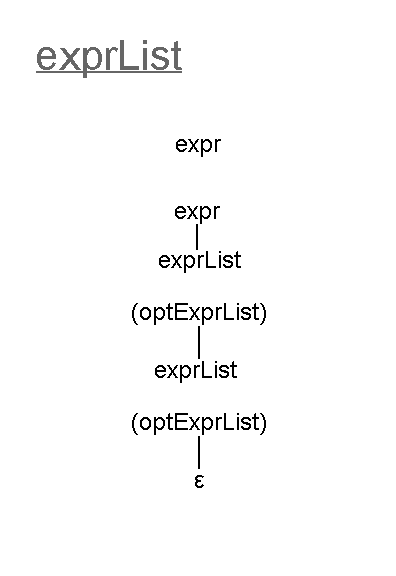
<style>
.page{position:relative;width:396px;height:576px;background:#ffffff}
.page>*{position:absolute;margin:0}
.t1{font:42px "ArialMT";color:#666666}
.t2{font:12px "ArialMT";color:#000000}
</style>
<div class="page">
<p class="t1" style="left:37px;top:40px;width:145px;height:38px">exprList</p>
<p class="t2" style="left:176px;top:139px;width:45px;height:18px">expr</p>
<p class="t2" style="left:175px;top:206px;width:45px;height:18px">expr</p>
<p class="t2" style="left:159px;top:251px;width:82px;height:22px">exprList</p>
<p class="t2" style="left:132px;top:303px;width:134px;height:22px">(optExprList)</p>
<p class="t2" style="left:155px;top:361px;width:82px;height:22px">exprList</p>
<p class="t2" style="left:132px;top:413px;width:134px;height:22px">(optExprList)</p>
<p class="t2" style="left:195px;top:475px;width:9px;height:13px">ε</p>
</div>
